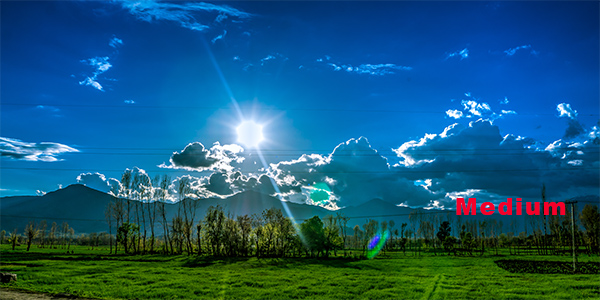
<style>
.page{position:relative;width:600px;height:300px}
.page>*{position:absolute;margin:0}
.t1{font:24px "Arial-Black";letter-spacing:0.075em;color:#f40029}
</style>
<div class="page">
<p class="t1" style="left:456px;top:198px;width:110px;height:17px">Medium</p>
</div>
